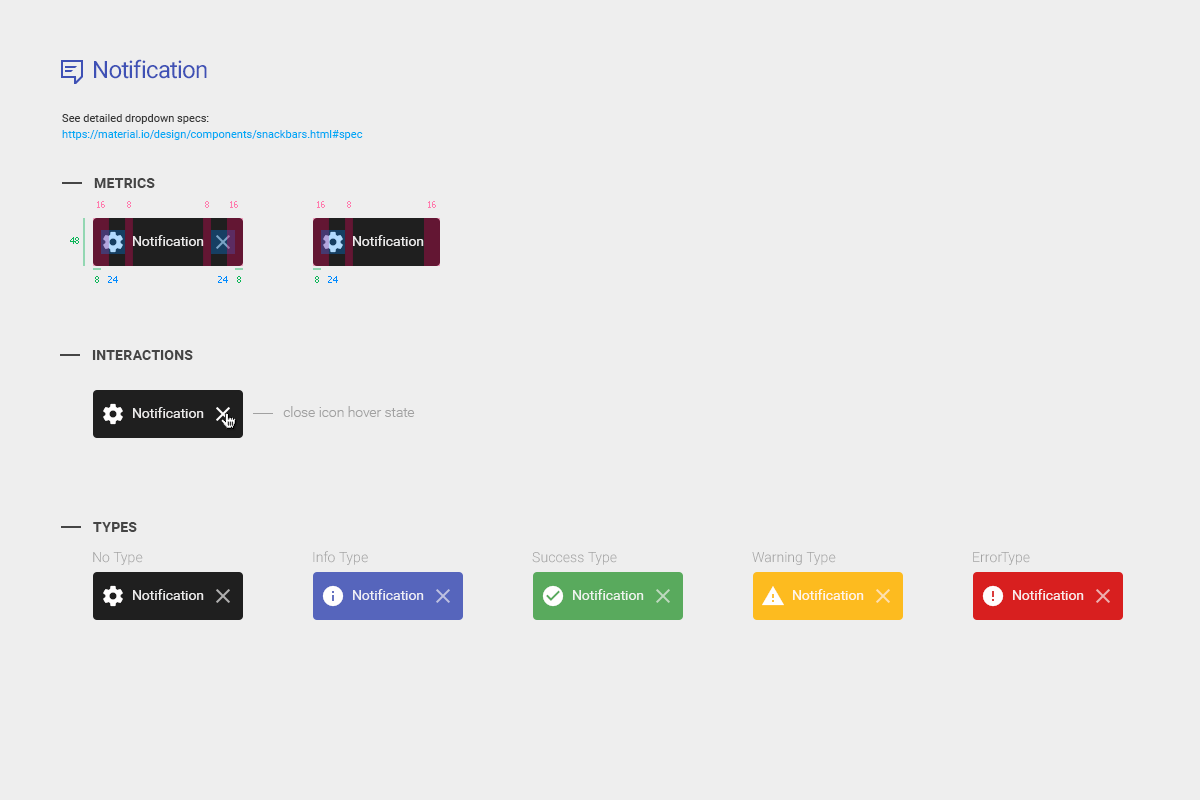
<style>
.page{position:relative;width:1200px;height:800px;background:#eeeeee}
.page>*{position:absolute;margin:0}
.t1{font:24px "Roboto-Regular";letter-spacing:-0.025em;color:#3f51b5}
.t2{font:11px/16px "Roboto-Regular";color:#03a9f4}
.t3{font:11px/16px "Roboto-Regular";color:#383838}
.t4{font:14px "Roboto-Bold";letter-spacing:0.01em;color:#454545;text-transform:uppercase}
.t5{font:9px "Tahoma";color:#ff7cae}
.t6{font:9px "Tahoma";color:#0bb557}
.t7{font:14px "Roboto-Regular";color:#fffefe}
.t8{font:9px "Tahoma";color:#008aff}
.t9{font:14px "Roboto-Light";color:#a1a1a1}
.t10{font:14px "Roboto-Light";letter-spacing:0.01em;color:#a1a1a1}
</style>
<div class="page">
<p class="t1" style="left:94px;top:59px;width:113px;height:20px">Notification</p>
<p class="t2" style="left:62px;top:114px;width:301px;height:26px"><span class="t3">See detailed dropdown specs:<br></span>https://material.io/design/components/snackbars.html#spec</p>
<p class="t4" style="left:94px;top:178px;width:61px;height:10px">Metrics</p>
<p class="t5" style="left:97px;top:201px;width:8px;height:7px">16</p>
<p class="t5" style="left:127px;top:201px;width:4px;height:7px">8</p>
<p class="t5" style="left:205px;top:201px;width:4px;height:7px">8</p>
<p class="t5" style="left:230px;top:201px;width:8px;height:7px">16</p>
<p class="t5" style="left:317px;top:201px;width:8px;height:7px">16</p>
<p class="t5" style="left:347px;top:201px;width:4px;height:7px">8</p>
<p class="t5" style="left:428px;top:201px;width:8px;height:7px">16</p>
<p class="t6" style="left:70px;top:237px;width:9px;height:7px">48</p>
<p class="t7" style="left:133px;top:235px;width:71px;height:11px;opacity:0.87">Notification</p>
<p class="t7" style="left:353px;top:235px;width:71px;height:11px;opacity:0.87">Notification</p>
<p class="t6" style="left:95px;top:276px;width:4px;height:7px">8</p>
<p class="t8" style="left:108px;top:276px;width:10px;height:7px">24</p>
<p class="t8" style="left:218px;top:276px;width:10px;height:7px">24</p>
<p class="t6" style="left:237px;top:276px;width:4px;height:7px">8</p>
<p class="t6" style="left:315px;top:276px;width:4px;height:7px">8</p>
<p class="t8" style="left:328px;top:276px;width:10px;height:7px">24</p>
<p class="t4" style="left:92px;top:350px;width:101px;height:10px">Interactions</p>
<p class="t7" style="left:133px;top:407px;width:71px;height:11px;opacity:0.87">Notification</p>
<p class="t9" style="left:283px;top:406px;width:132px;height:11px">close icon hover state</p>
<p class="t4" style="left:93px;top:522px;width:44px;height:10px">types</p>
<p class="t10" style="left:93px;top:552px;width:50px;height:13px">No Type</p>
<p class="t10" style="left:313px;top:551px;width:55px;height:14px">Info Type</p>
<p class="t10" style="left:532px;top:552px;width:85px;height:13px">Success Type</p>
<p class="t10" style="left:752px;top:552px;width:84px;height:13px">Warning Type</p>
<p class="t10" style="left:973px;top:552px;width:57px;height:13px">ErrorType</p>
<p class="t7" style="left:133px;top:589px;width:71px;height:11px;opacity:0.87">Notification</p>
<p class="t7" style="left:353px;top:589px;width:71px;height:11px;opacity:0.87">Notification</p>
<p class="t7" style="left:573px;top:589px;width:71px;height:11px;opacity:0.87">Notification</p>
<p class="t7" style="left:793px;top:589px;width:71px;height:11px;opacity:0.87">Notification</p>
<p class="t7" style="left:1013px;top:589px;width:71px;height:11px;opacity:0.87">Notification</p>
</div>
